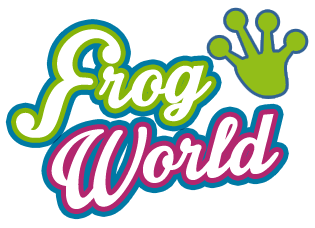
<style>
.page{position:relative;width:315px;height:228px;background:#ffffff}
.page>*{position:absolute;margin:0}
.t1{font:136.6px "IntriqueScriptPersonalUse";color:#ffffff}
.t2{font:102px "IntriqueScriptPersonalUse";color:#ffffff}
</style>
<div class="page">
<p class="t1" style="left:16px;top:29px;width:196px;height:109px;rotate:-4deg">Frog</p>
<p class="t1" style="left:51px;top:113px;width:228px;height:96px;rotate:-5deg"><span class="t2">W</span>orld</p>
</div>
